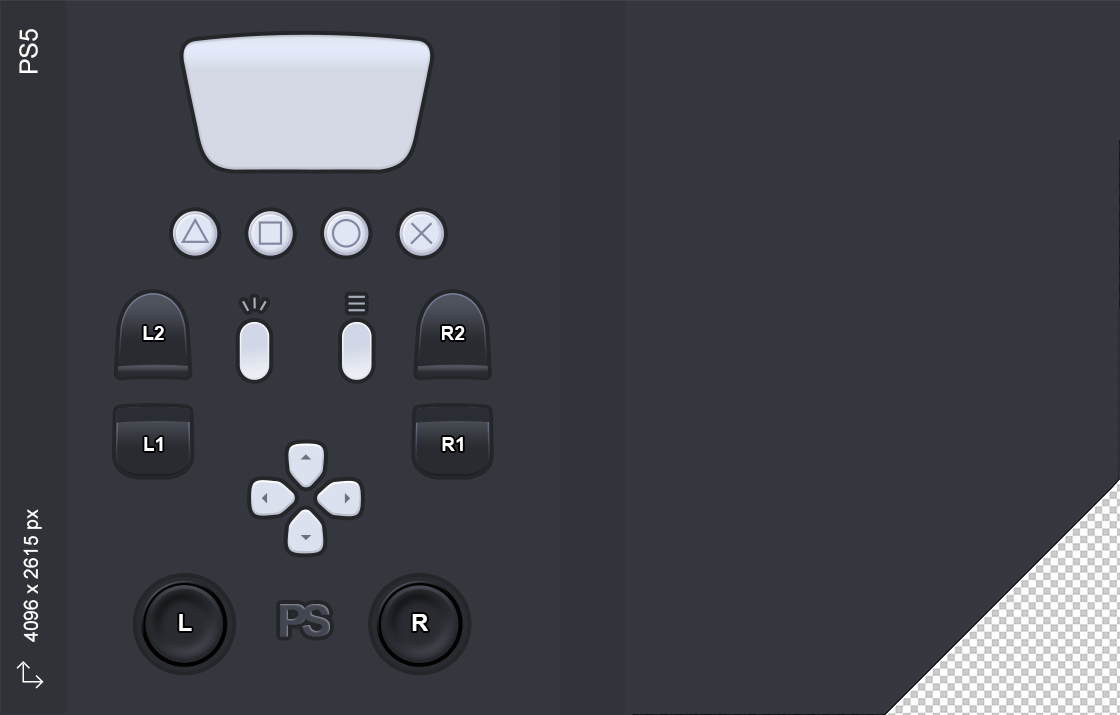
<style>
.page{position:relative;width:1120px;height:715px;background:#35373e}
.page>*{position:absolute;margin:0}
.t1{font:25px "ArialMT";color:#ffffff}
.t2{font:19.3px "Arial-BoldMT";color:#ffffff}
.t3{font:19.6px "ArialMT";color:#ffffff}
.t4{font:45.1px "Arial-BoldMT";letter-spacing:-0.15em;color:#414650;font-weight:bold}
.t5{font:24px "Arial-BoldMT";color:#ffffff}
</style>
<div class="page">
<p class="t1" style="left:19px;top:29px;width:19px;height:44px;rotate:-90deg">PS5</p>
<p class="t2" style="left:143px;top:326px;width:21px;height:14px">L2</p>
<p class="t2" style="left:442px;top:326px;width:23px;height:14px">R2</p>
<p class="t2" style="left:144px;top:437px;width:19px;height:14px">L1</p>
<p class="t2" style="left:442px;top:437px;width:21px;height:14px">R1</p>
<p class="t3" style="left:23px;top:509px;width:19px;height:133px;rotate:-90deg">4096 x 2615 px</p>
<p class="t4" style="left:280px;top:604px;width:50px;height:33px">PS</p>
<p class="t5" style="left:179px;top:614px;width:13px;height:17px">L</p>
<p class="t5" style="left:412px;top:614px;width:16px;height:17px">R</p>
</div>
